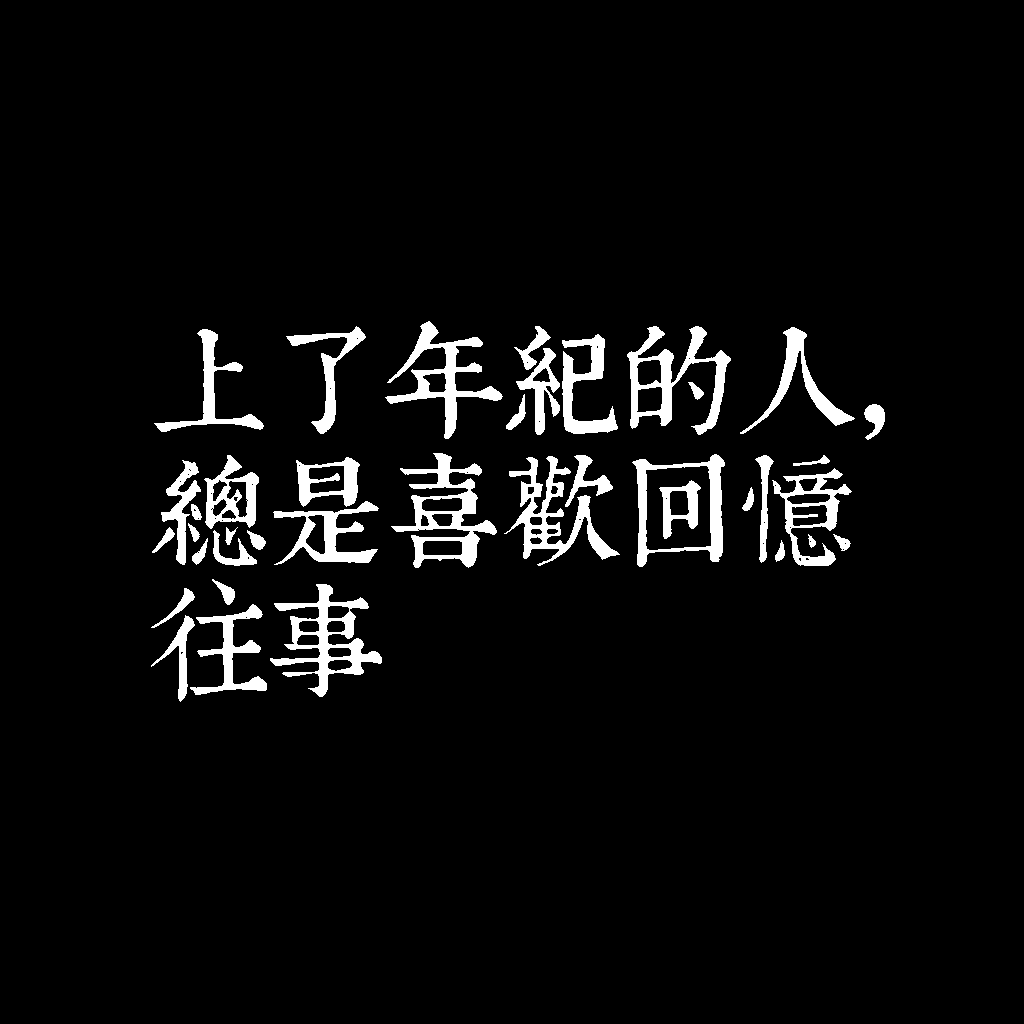
<style>
.page{position:relative;width:1024px;height:1024px;background:#000000}
.page>*{position:absolute;margin:0}
.t1{font:120px/130px "TpldKhangXiDictTrial";letter-spacing:-0.02em;color:#ffffff}
</style>
<div class="page">
<p class="t1" style="left:151px;top:321px;width:734px;height:381px">上了年紀的人，<br>總是喜歡回憶<br>往事</p>
</div>
